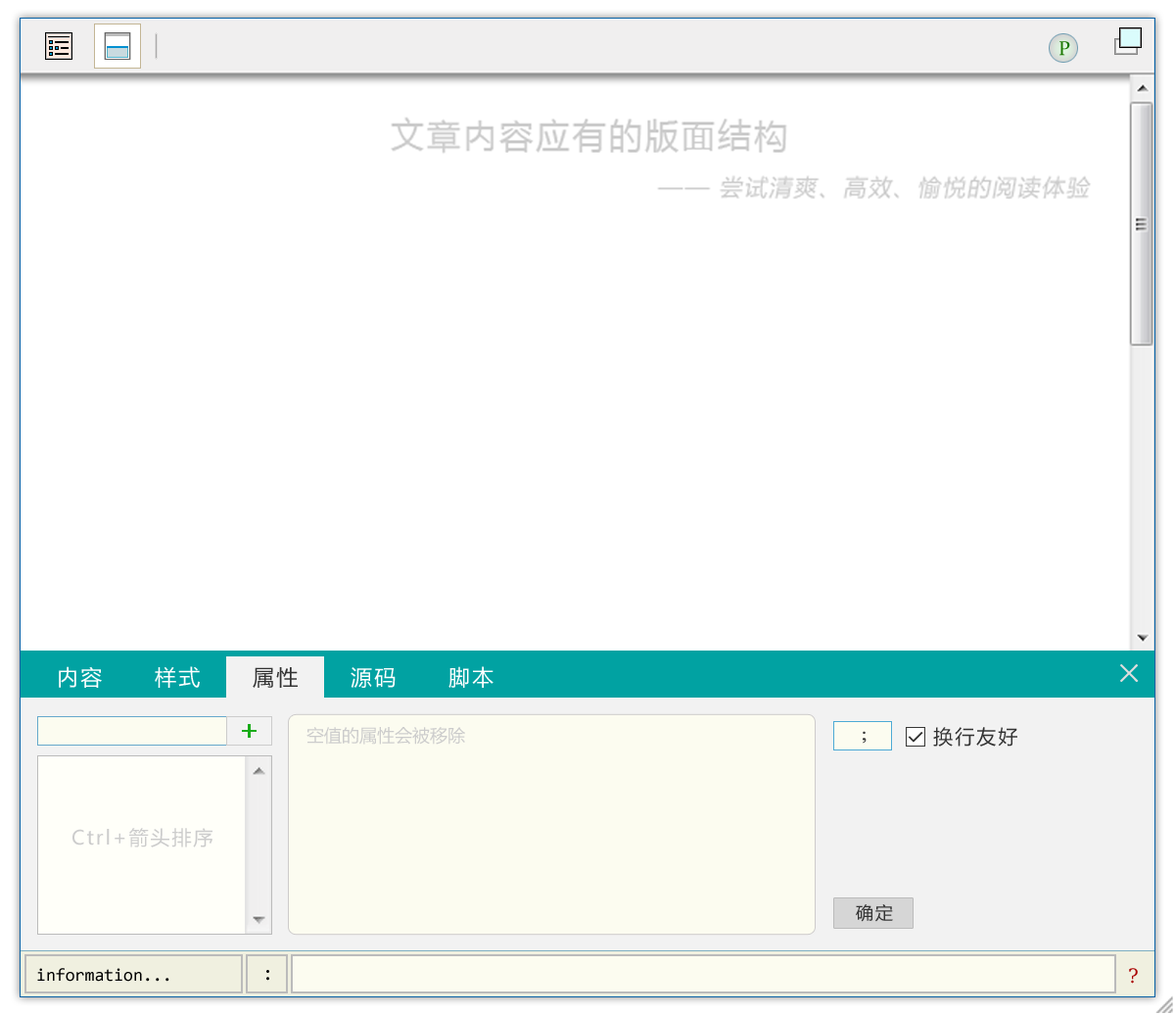
<style>
.page{position:relative;width:1175px;height:1015px;background:#ffffff}
.page>*{position:absolute;margin:0}
.t1{font:19.6px "Constantia";color:#1b7802}
.t2{font:21.5px "MicrosoftYaHei";letter-spacing:0.1em;color:#ffffff}
.t3{font:27.4px "NSimSun";letter-spacing:0.1em;color:#dddddd;font-weight:bold}
.t4{font:21.5px "MicrosoftYaHei";letter-spacing:0.1em;color:#333333}
.t5{font:17.6px "MicrosoftYaHei";color:#cccccc}
.t6{font:17.6px "TimesNewRomanPSMT";letter-spacing:0.1em;color:#333333;font-weight:bold}
.t7{font:19.6px "MicrosoftYaHei";letter-spacing:0.1em;color:#333333}
.t8{font:19.6px "MicrosoftYaHei";letter-spacing:0.1em;color:#cccccc}
.t9{font:17.6px "MicrosoftYaHei";letter-spacing:0.1em;color:#333333}
.t10{font:17.6px "Consolas";color:#000000}
.t11{font:19.6px "Consolas";color:#000000}
.t12{font:19.6px "DejaVuSerif";color:#aa0000}
</style>
<div class="page">
<p class="t1" style="left:1060px;top:41px;width:10px;height:15px">P</p>
<p class="t2" style="left:59px;top:666px;width:43px;height:22px">内容</p>
<p class="t2" style="left:155px;top:666px;width:45px;height:22px">样式</p>
<p class="t2" style="left:449px;top:666px;width:45px;height:22px">脚本</p>
<p class="t3" style="left:1120px;top:664px;width:19px;height:18px">×</p>
<p class="t4" style="left:253px;top:667px;width:45px;height:21px">属性</p>
<p class="t2" style="left:351px;top:667px;width:45px;height:21px">源码</p>
<p class="t5" style="left:307px;top:727px;width:158px;height:17px">空值的属性会被移除</p>
<p class="t6" style="left:863px;top:731px;width:4px;height:12px">;</p>
<p class="t7" style="left:933px;top:727px;width:85px;height:19px">换行友好</p>
<p class="t8" style="left:72px;top:828px;width:141px;height:19px">Ctrl+箭头排序</p>
<p class="t9" style="left:856px;top:904px;width:37px;height:18px">确定</p>
<p class="t10" style="left:37px;top:968px;width:132px;height:13px">information...</p>
<p class="t11" style="left:266px;top:970px;width:3px;height:10px">:</p>
<p class="t12" style="left:1129px;top:968px;width:9px;height:15px">?</p>
</div>
